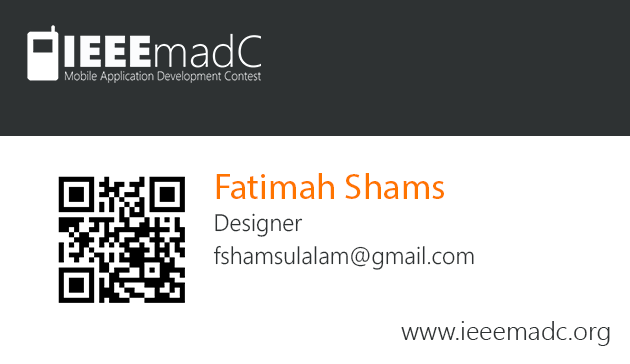
<style>
.page{position:relative;width:630px;height:364px;background:#ffffff}
.page>*{position:absolute;margin:0}
.t1{font:36px "MyriadPro-Regular";color:#ff7400}
.t2{font:24px "NirmalaUI-Semilight";color:#2e3233;scale:0.97 1}
.t3{font:26px "NirmalaUI-Semilight";color:#2e3233}
</style>
<div class="page">
<p class="t1" style="left:216px;top:173px;width:228px;height:26px">Fatimah Shams</p>
<p class="t2" style="left:215px;top:213px;width:88px;height:24px">Designer</p>
<p class="t2" style="left:213px;top:245px;width:261px;height:25px">fshamsulalam@gmail.com</p>
<p class="t3" style="left:401px;top:321px;width:209px;height:25px">www.ieeemadc.org</p>
</div>
